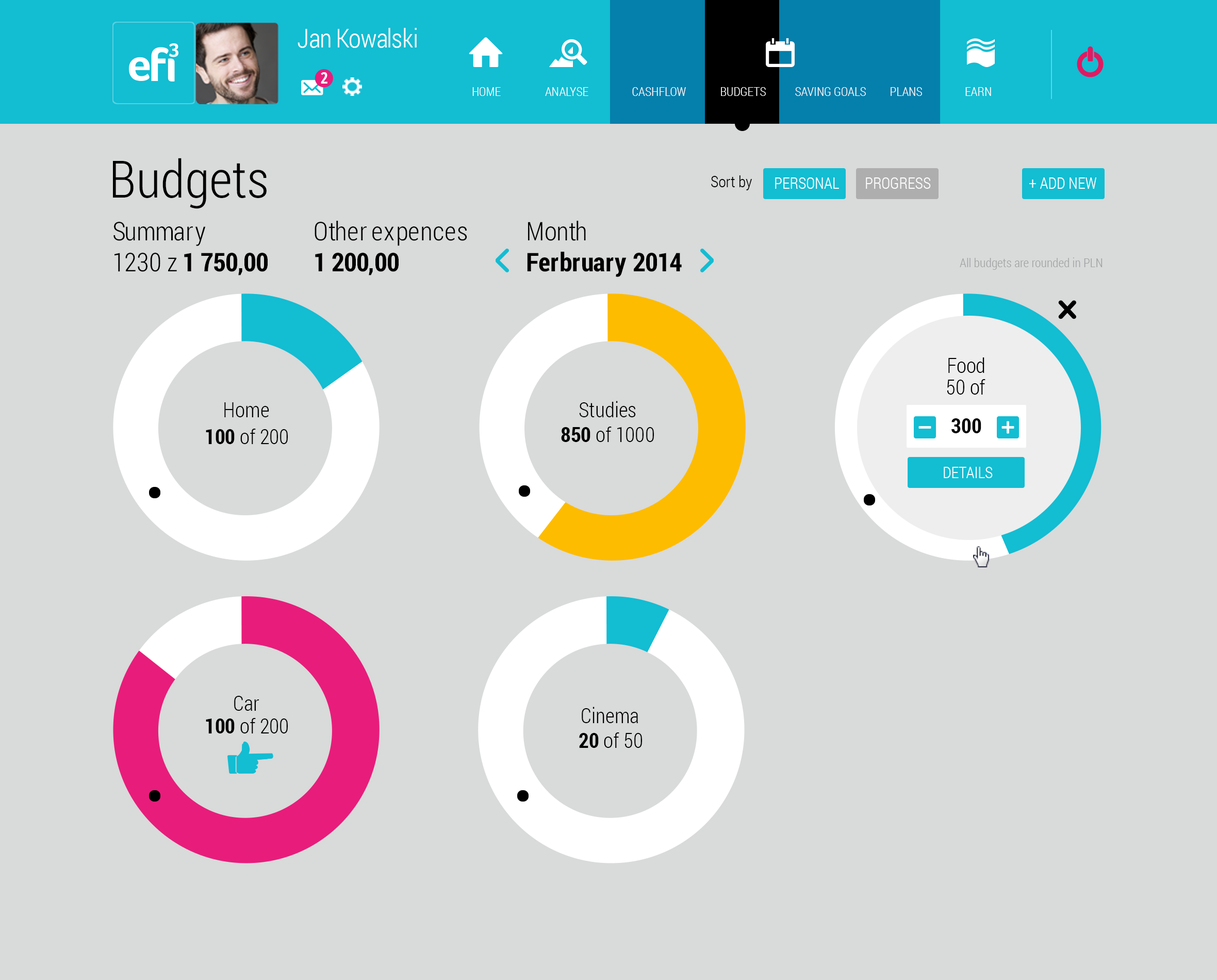
<style>
.page{position:relative;width:1217px;height:980px;background:#d9dada}
.page>*{position:absolute;margin:0}
.t1{font:25.8px "RobotoCondensed-Light";letter-spacing:-0.025em;color:#ffffff}
.t2{font:15.8px "OpenSans-CondensedBold";color:#ffffff;scale:1.04 1}
.t3{font:12.4px "RobotoCondensed-Light";color:#ffffff;text-transform:uppercase}
.t4{font:51.6px "RobotoCondensed-Light";color:#000000}
.t5{font:15.5px "RobotoCondensed-Light";color:#000000}
.t6{font:15.5px "RobotoCondensed-Light";color:#ffffff;text-transform:uppercase}
.t7{font:25.8px "RobotoCondensed-Light";color:#000000}
.t8{font:25.8px "RobotoCondensed-Bold";color:#000000}
.t9{font:12.4px "RobotoCondensed-Light";color:#8b8e8f}
.t10{font:20.6px "RobotoCondensed-Light";color:#000000}
.t11{font:20.6px "RobotoCondensed-Bold";color:#000000}
</style>
<div class="page">
<p class="t1" style="left:298px;top:28px;width:119px;height:20px">Jan Kowalski</p>
<p class="t2" style="left:321px;top:72px;width:6px;height:12px">2</p>
<p class="t3" style="left:472px;top:87px;width:29px;height:9px">Home</p>
<p class="t3" style="left:545px;top:87px;width:43px;height:9px">AnALYSE</p>
<p class="t3" style="left:632px;top:87px;width:290px;height:9px">Cashflow             BUDGETS           Saving goals         PLANS</p>
<p class="t3" style="left:965px;top:87px;width:26px;height:9px">EARN</p>
<p class="t4" style="left:113px;top:158px;width:154px;height:51px">Budgets</p>
<p class="t5" style="left:711px;top:175px;width:41px;height:15px">Sort by</p>
<p class="t6" style="left:775px;top:177px;width:64px;height:12px">Personal</p>
<p class="t6" style="left:866px;top:177px;width:65px;height:12px">Progress</p>
<p class="t6" style="left:1029px;top:177px;width:67px;height:12px">+ add new</p>
<p class="t7" style="left:113px;top:222px;width:155px;height:53px">Summary<br>1230 z <span class="t8">1 750,00</span></p>
<p class="t7" style="left:315px;top:221px;width:152px;height:54px">Other expences<br><span class="t8">1 200,00</span></p>
<p class="t8" style="left:527px;top:221px;width:155px;height:56px"><span class="t7">Month<br></span>Ferbruary 2014</p>
<p class="t9" style="left:960px;top:257px;width:143px;height:13px;opacity:0.77">All budgets are rounded in PLN</p>
<p class="t10" style="left:948px;top:357px;width:36px;height:16px">Food</p>
<p class="t10" style="left:947px;top:379px;width:38px;height:15px">50 of</p>
<p class="t10" style="left:579px;top:401px;width:57px;height:16px">Studies</p>
<p class="t10" style="left:224px;top:402px;width:45px;height:15px">Home</p>
<p class="t11" style="left:951px;top:418px;width:30px;height:15px">300</p>
<p class="t10" style="left:206px;top:429px;width:82px;height:15px"><span class="t11">100 </span>of 200</p>
<p class="t10" style="left:561px;top:426px;width:93px;height:16px"><span class="t11">850 </span>of 1000</p>
<p class="t6" style="left:944px;top:467px;width:49px;height:11px">Details</p>
<p class="t10" style="left:234px;top:696px;width:25px;height:15px">Car</p>
<p class="t10" style="left:582px;top:706px;width:56px;height:17px">Cinema</p>
<p class="t10" style="left:206px;top:718px;width:82px;height:15px"><span class="t11">100 </span>of 200</p>
<p class="t10" style="left:579px;top:732px;width:63px;height:16px"><span class="t11">20 </span>of 50</p>
</div>
